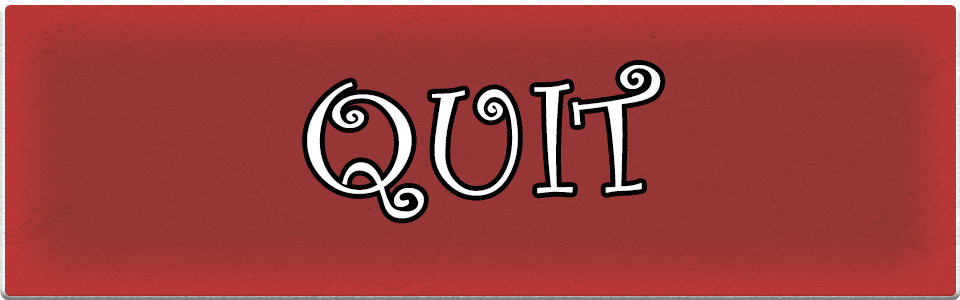
<style>
.page{position:relative;width:960px;height:300px;background:#983737}
.page>*{position:absolute;margin:0}
.t1{font:160px "CurlzMT";color:#ffffff;font-weight:bold}
</style>
<div class="page">
<p class="t1" style="left:307px;top:65px;width:354px;height:154px">QUIT</p>
</div>
